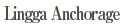
<style>
.page{position:relative;width:121px;height:27px;background:#ffffff}
.page>*{position:absolute;margin:0}
.t1{font:18px "RyuminPro-ExBold";letter-spacing:-0.08em;color:#4c4843;scale:0.85 1}
</style>
<div class="page">
<p class="t1" style="left:4px;top:6px;width:116px;height:17px">Lingga Anchorage</p>
</div>
